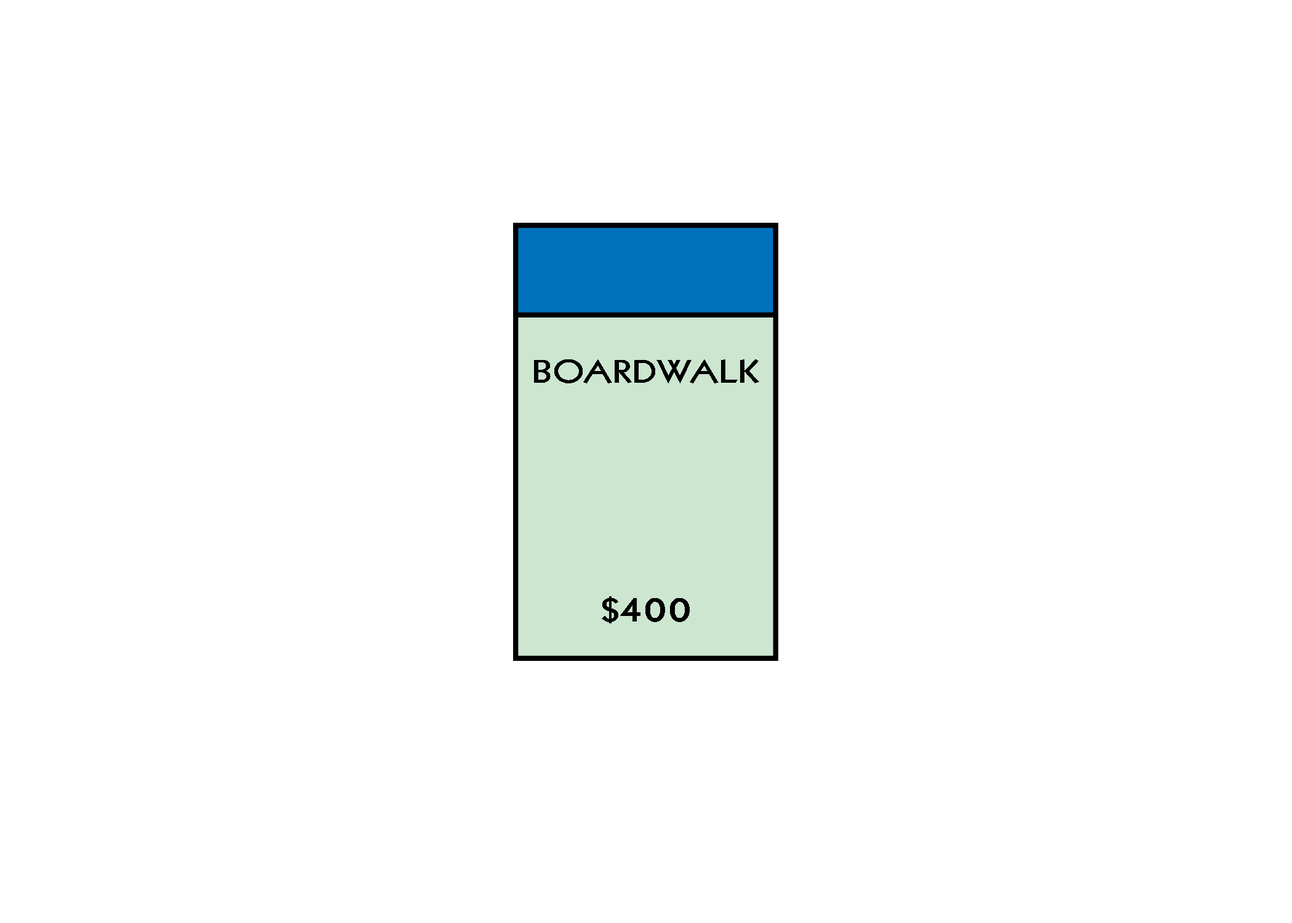
<style>
.page{position:relative;width:1292px;height:923px;background:#ffffff}
.page>*{position:absolute;margin:0}
.t1{font:32px "Kabel-Heavy";letter-spacing:0.04em;color:#000000;scale:1.16 1}
.t2{font:38.5px "Kabel-Heavy";letter-spacing:0.04em;color:#000000;scale:1.16 1}
</style>
<div class="page">
<p class="t1" style="left:534px;top:359px;width:225px;height:24px">BOARDWALK</p>
<p class="t2" style="left:602px;top:596px;width:88px;height:27px"><span class="t1">$</span>400</p>
</div>
